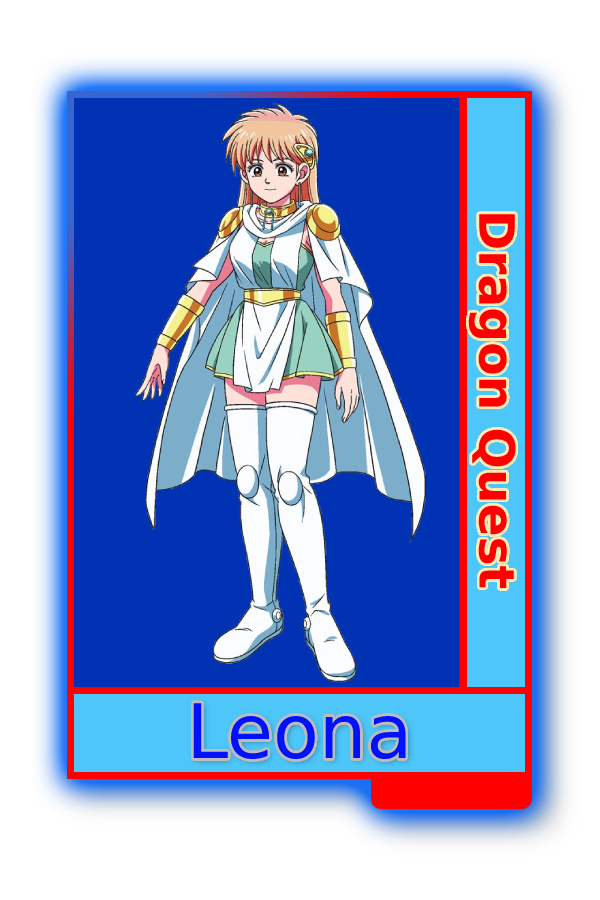
<style>
.page{position:relative;width:600px;height:900px;background:#0032b3}
.page>*{position:absolute;margin:0}
.t1{font:48.8px "MADETOMMY-Bold";color:#ff0000}
.t2{font:75px "CoolveticaRg-Regular";color:#0011fd}
</style>
<div class="page">
<p class="t1" style="left:468px;top:214px;width:48px;height:374px;rotate:90deg">Dragon Quest</p>
<p class="t2" style="left:193px;top:703px;width:213px;height:57px">Leona</p>
</div>
